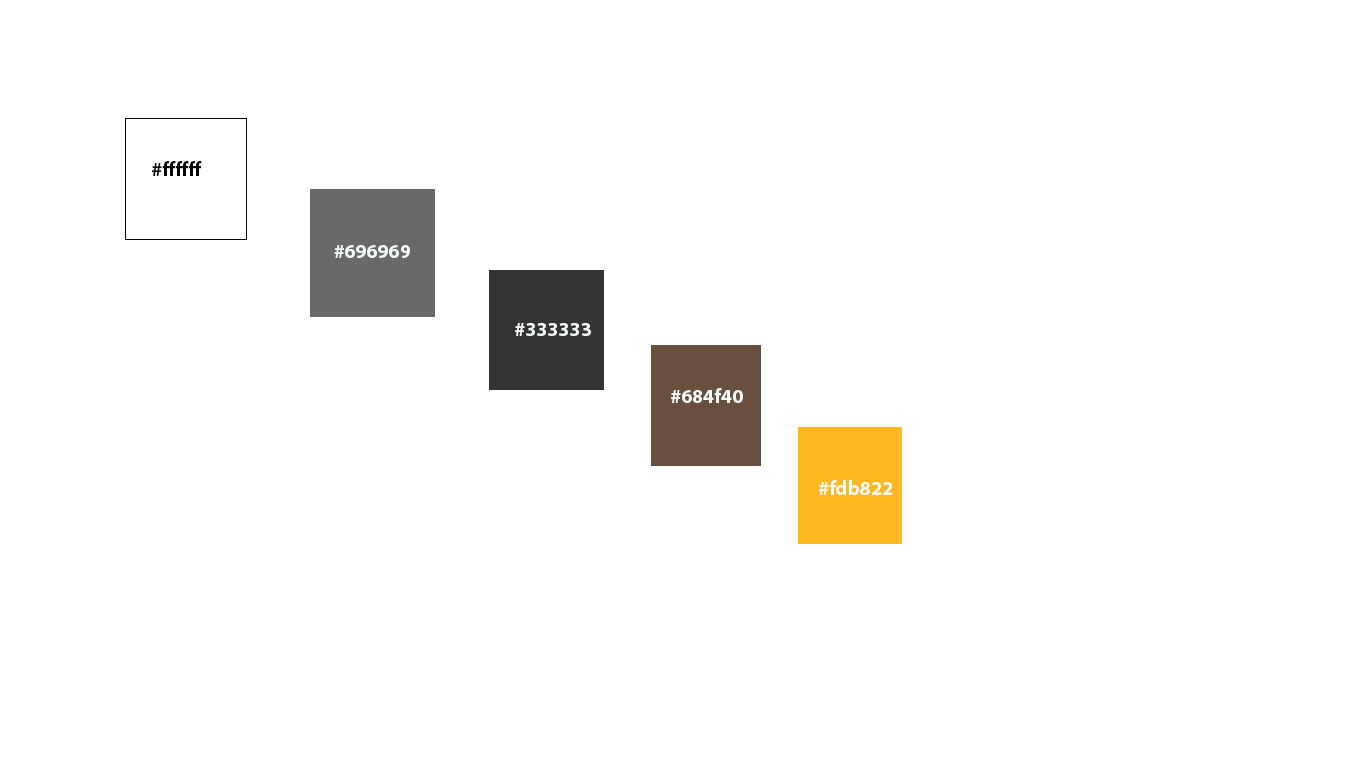
<style>
.page{position:relative;width:1366px;height:768px;background:#ffffff}
.page>*{position:absolute;margin:0}
.t1{font:20px "MyriadPro-Bold";color:#050505}
.t2{font:20px "MyriadPro-Bold";color:#f5fbf7}
</style>
<div class="page">
<p class="t1" style="left:152px;top:161px;width:50px;height:15px">#ffffff</p>
<p class="t2" style="left:334px;top:245px;width:76px;height:13px">#696969</p>
<p class="t2" style="left:515px;top:323px;width:76px;height:13px">#333333</p>
<p class="t2" style="left:671px;top:388px;width:72px;height:15px">#684f40</p>
<p class="t2" style="left:819px;top:480px;width:74px;height:15px">#fdb822</p>
</div>
